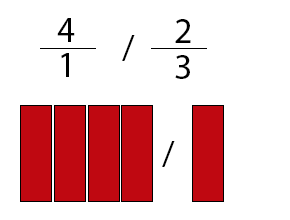
<style>
.page{position:relative;width:290px;height:220px;background:#ffffff}
.page>*{position:absolute;margin:0}
.t1{font:36px "MyriadPro-Regular";color:#000000}
</style>
<div class="page">
<p class="t1" style="left:57px;top:18px;width:18px;height:24px">4</p>
<p class="t1" style="left:175px;top:19px;width:16px;height:24px">2</p>
<p class="t1" style="left:122px;top:35px;width:13px;height:26px">/</p>
<p class="t1" style="left:61px;top:53px;width:8px;height:24px">1</p>
<p class="t1" style="left:175px;top:55px;width:15px;height:24px">3</p>
<p class="t1" style="left:162px;top:141px;width:13px;height:26px">/</p>
</div>
